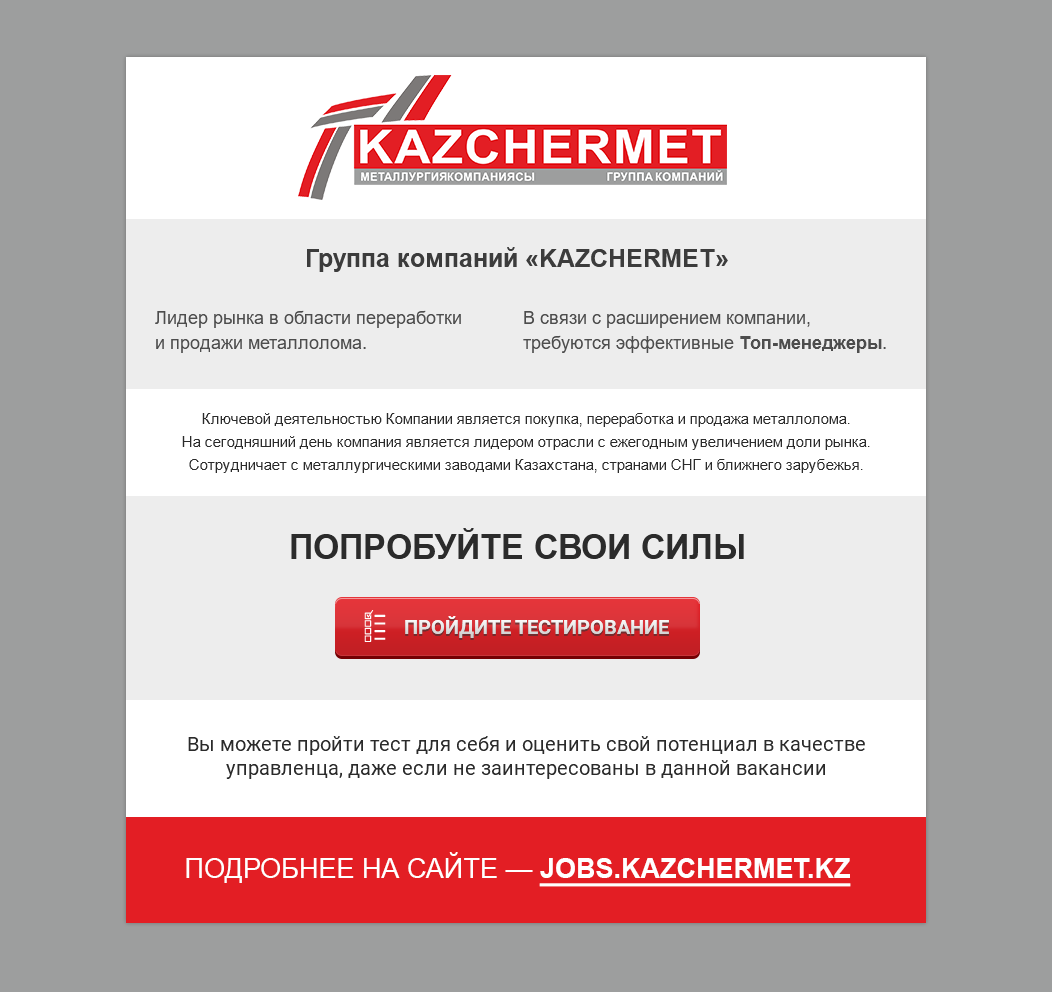
<style>
.page{position:relative;width:1052px;height:992px;background:#9d9e9e}
.page>*{position:absolute;margin:0}
.t1{font:25px "Arial-BoldMT";color:#3c3c3c}
.t2{font:18px/45px "ArialMT";color:#4d4d4d}
.t3{font:18px/29px "Arial-BoldMT";color:#2b2b2b}
.t4{font:18px/25px "ArialMT";color:#4d4d4d}
.t5{font:18px "ArialMT";color:#4d4d4d}
.t6{font:18px/25px "Arial-BoldMT";color:#4d4d4d}
.t7{font:15px/23px "ArialMT";color:#2b2b2b}
.t8{font:33.7px "Arial-BoldMT";color:#2b2b2b;text-transform:uppercase}
.t9{font:20px "Roboto-Bold";color:#e8e8e8;text-transform:uppercase}
.t10{font:20px "Roboto-Regular";color:#2b2b2b}
.t11{font:27px "ArialMT";color:#ffffff;text-transform:uppercase}
.t12{font:27px "Arial-BoldMT";color:#ffffff;text-transform:uppercase;text-decoration:underline}
</style>
<div class="page">
<p class="t1" style="left:307px;top:247px;width:421px;height:25px">Группа компаний «KAZCHERMET»</p>
<p class="t2" style="left:155px;top:310px;width:306px;height:43px"><span class="t3"><br></span>Лидер рынка в области переработки<br><span class="t4">и продажи металлолома.</span></p>
<p class="t5" style="left:523px;top:311px;width:363px;height:42px">В связи с расширением компании,<br><span class="t4">требуются эффективные </span><span class="t6">Топ-менеджеры</span><span class="t4">.</span></p>
<p class="t7" style="left:182px;top:413px;width:688px;height:60px;text-align:center">Ключевой деятельностью Компании является покупка, переработка и продажа металлолома. <br>На сегодняшний день компания является лидером отрасли с ежегодным увеличением доли рынка.<br>Сотрудничает с металлургическими заводами Казахстана, странами СНГ и ближнего зарубежья.</p>
<p class="t8" style="left:291px;top:528px;width:453px;height:31px">Попробуйте свои силы</p>
<p class="t9" style="left:405px;top:616px;width:264px;height:22px">пройдите тестирование</p>
<p class="t10" style="left:188px;top:736px;width:677px;height:43px;text-align:center">Вы можете пройти тест для себя и оценить свой потенциал в качестве управленца, даже если не заинтересованы в данной вакансии</p>
<p class="t11" style="left:186px;top:852px;width:665px;height:35px">Подробнее на сайте — <span class="t12">jobs.kazchermet.kz</span></p>
</div>
